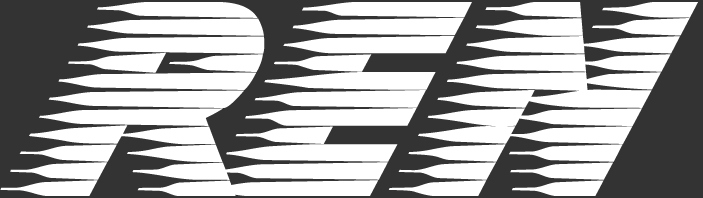
<style>
.page{position:relative;width:703px;height:198px;background:#ffffff}
.page>*{position:absolute;margin:0}
.t1{font:291px "SlipstreamForward";color:#ffffff}
</style>
<div class="page">
<p class="t1" style="left:0px;top:2px;width:698px;height:194px">REN</p>
</div>
